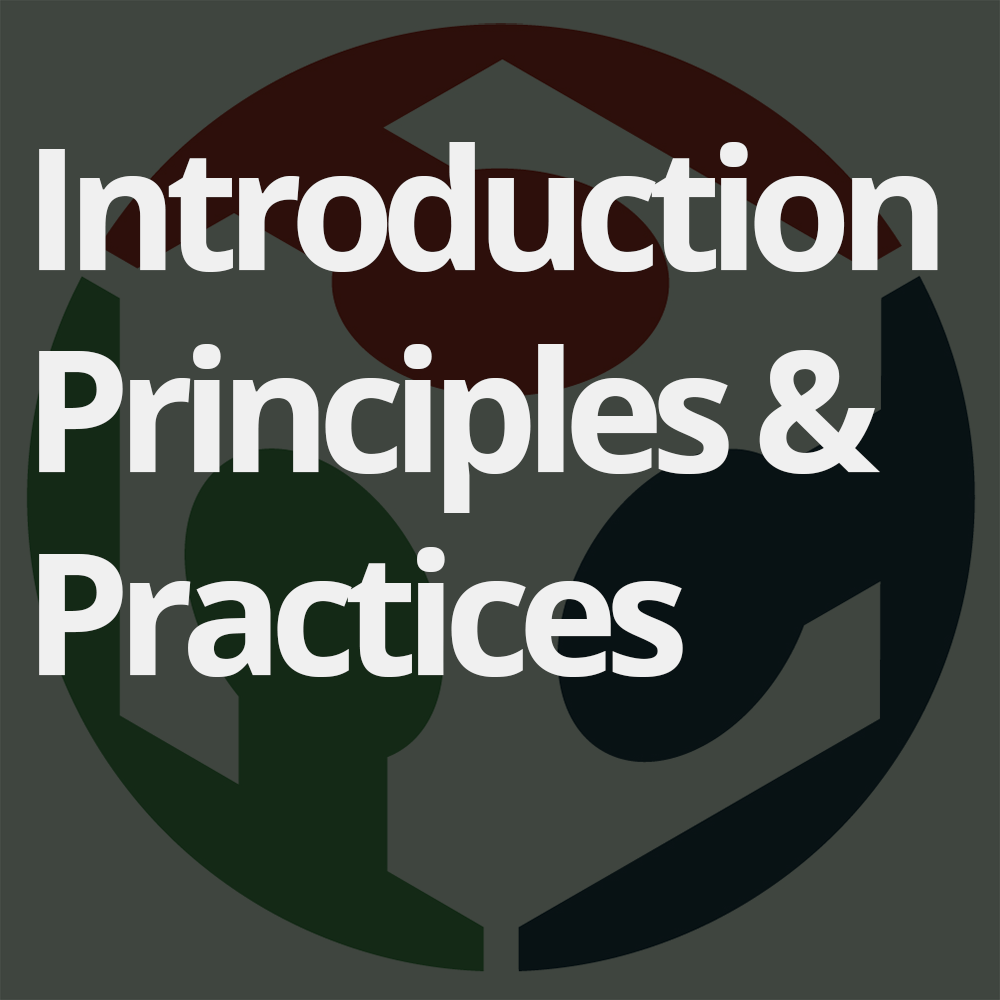
<style>
.page{position:relative;width:1000px;height:1000px;background:#3f453f}
.page>*{position:absolute;margin:0}
.t1{font:168.7px "OpenSans-Bold";letter-spacing:-0.075em;color:#f0f0f0}
</style>
<div class="page">
<p class="t1" style="left:39px;top:142px;width:899px;height:535px">Introduction<br>Principles &amp;<br>Practices</p>
</div>
